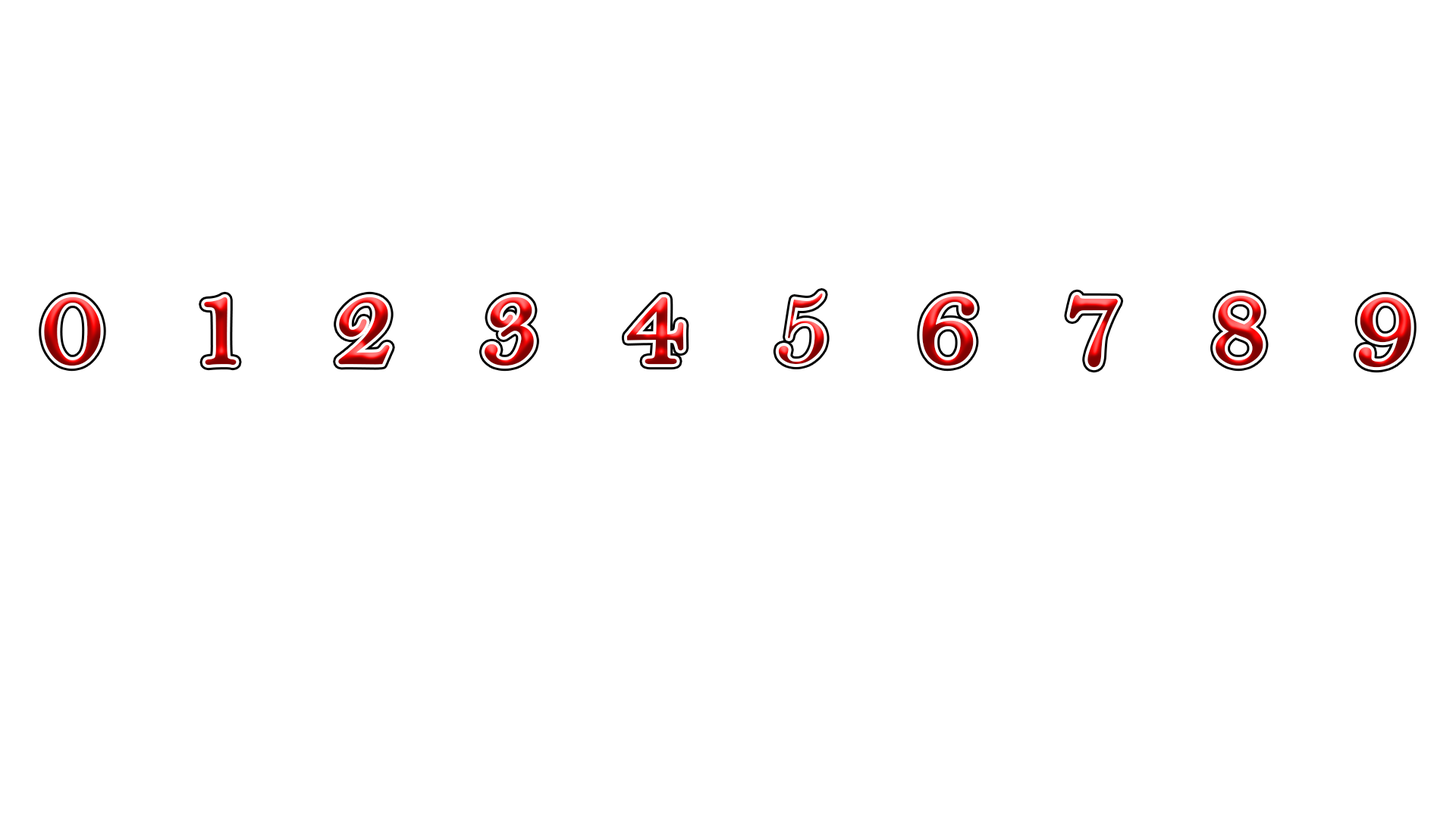
<style>
.page{position:relative;width:1456px;height:819px;background:#ffffff}
.page>*{position:absolute;margin:0}
.t1{font:119.8px "BellMT";letter-spacing:0.69em;font-weight:bold}
</style>
<div class="page">
<p class="t1" style="left:44px;top:293px;width:1367px;height:75px">0123456789</p>
</div>
